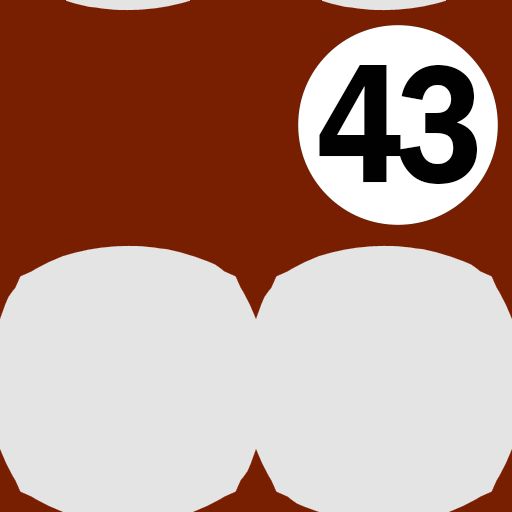
<style>
.page{position:relative;width:512px;height:512px;background:#e4e4e4}
.page>*{position:absolute;margin:0}
.t1{font:172.5px "FranklinGothic-Demi";letter-spacing:-0.05em;color:#010101;scale:0.87 1}
</style>
<div class="page">
<p class="t1" style="left:319px;top:65px;width:158px;height:119px">43</p>
</div>
